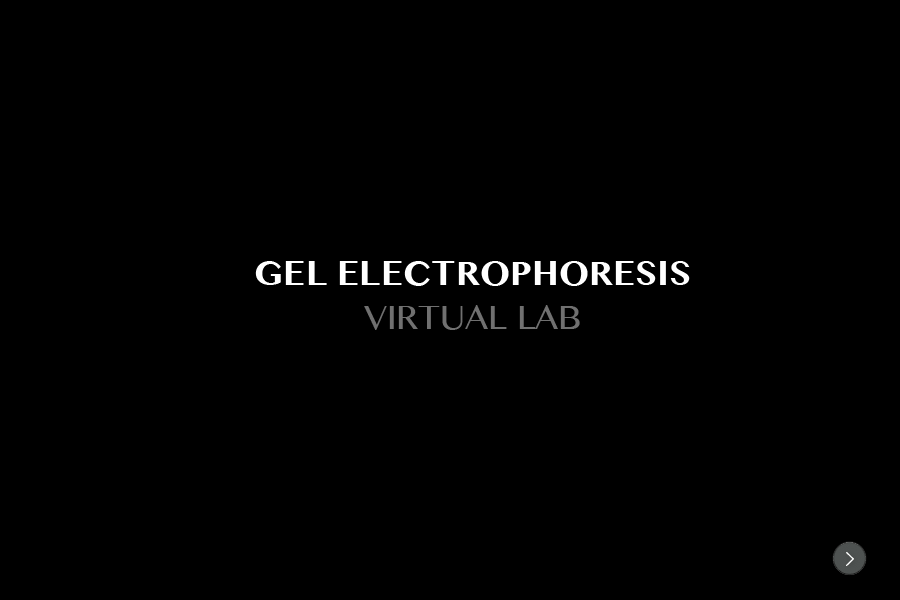
<style>
.page{position:relative;width:900px;height:600px;background:#000000}
.page>*{position:absolute;margin:0}
.t1{font:36px "TeluguMN-Bold";color:#ffffff}
.t2{font:36px "TeluguMN";color:#707070}
</style>
<div class="page">
<p class="t1" style="left:255px;top:261px;width:435px;height:69px;text-align:center">GEL ELECTROPHORESIS <span class="t2">VIRTUAL LAB</span></p>
</div>
